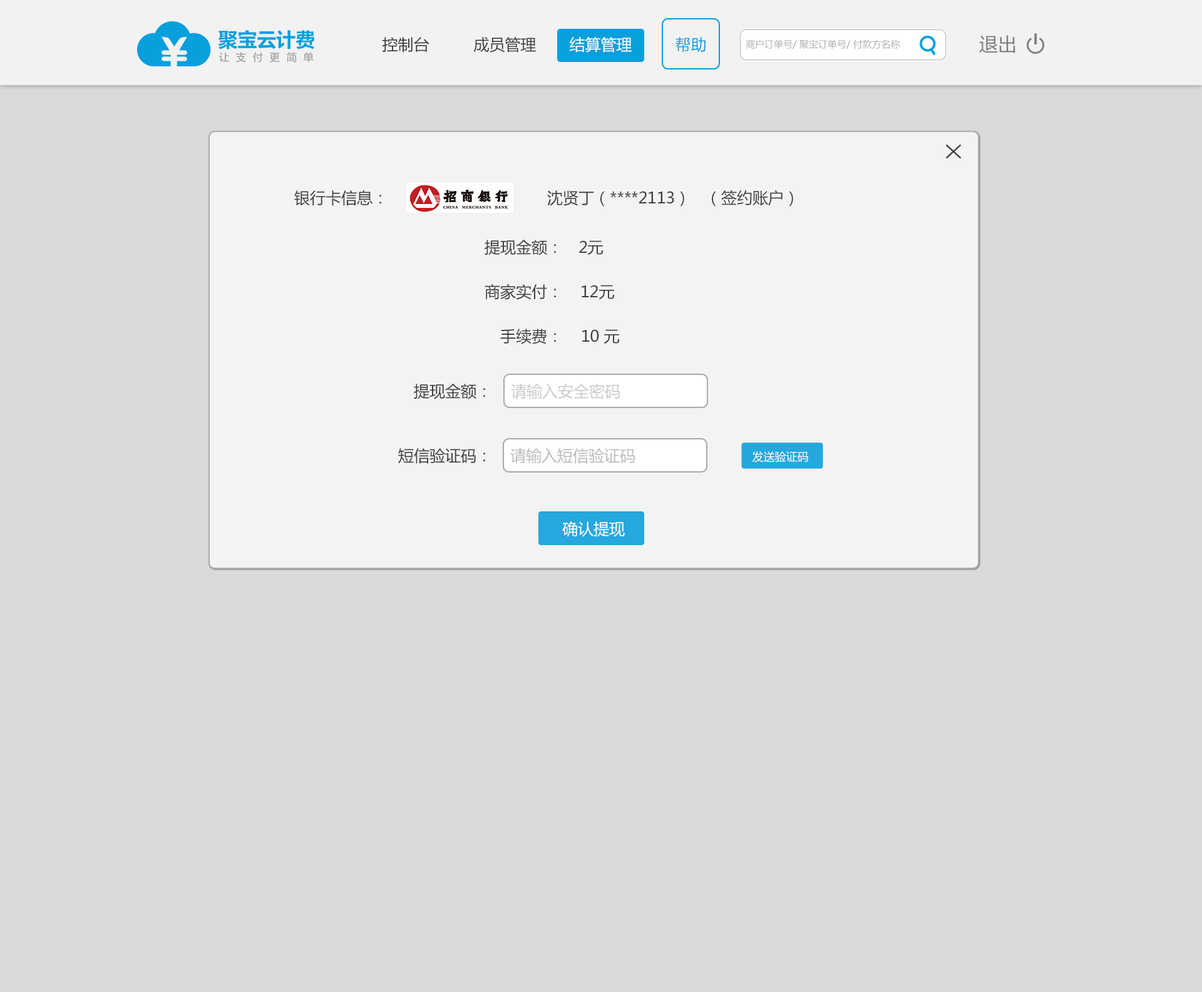
<style>
.page{position:relative;width:1202px;height:992px;background:#dadada}
.page>*{position:absolute;margin:0}
.t1{font:15.6px "MicrosoftYaHei";color:#3f3f3f}
.t2{font:15.6px "MicrosoftYaHei";color:#ffffff}
.t3{font:15.6px "MicrosoftYaHei";color:#099fdd}
.t4{font:9.4px "MicrosoftYaHei";color:#aeaeae}
.t5{font:18.8px "MicrosoftYaHei";color:#7d7d7d}
.t6{font:15.6px "MicrosoftYaHei";color:#cacaca}
.t7{font:15.6px "MicrosoftYaHei";color:#bbbbbb}
.t8{font:11.3px "MicrosoftYaHei";color:#ffffff}
</style>
<div class="page">
<p class="t1" style="left:382px;top:37px;width:47px;height:16px">控制台</p>
<p class="t1" style="left:473px;top:37px;width:63px;height:16px">成员管理</p>
<p class="t2" style="left:569px;top:37px;width:63px;height:16px">结算管理</p>
<p class="t3" style="left:675px;top:37px;width:30px;height:15px">帮助</p>
<p class="t4" style="left:746px;top:39px;width:154px;height:10px">商户订单号/ 聚宝订单号/ 付款方名称</p>
<p class="t5" style="left:979px;top:35px;width:36px;height:18px">退出</p>
<p class="t1" style="left:294px;top:190px;width:87px;height:16px">银行卡信息：</p>
<p class="t1" style="left:547px;top:190px;width:137px;height:17px">沈贤丁（****2113）</p>
<p class="t1" style="left:712px;top:190px;width:81px;height:17px">（签约账户）</p>
<p class="t1" style="left:484px;top:240px;width:72px;height:15px">提现金额：</p>
<p class="t1" style="left:579px;top:240px;width:24px;height:15px">2元</p>
<p class="t1" style="left:484px;top:284px;width:72px;height:16px">商家实付：</p>
<p class="t1" style="left:582px;top:285px;width:33px;height:15px">12元</p>
<p class="t1" style="left:500px;top:329px;width:56px;height:15px">手续费：</p>
<p class="t1" style="left:582px;top:329px;width:38px;height:15px">10 元</p>
<p class="t1" style="left:414px;top:384px;width:71px;height:15px">提现金额：</p>
<p class="t6" style="left:511px;top:384px;width:109px;height:15px">请输入安全密码</p>
<p class="t1" style="left:398px;top:448px;width:87px;height:16px">短信验证码：</p>
<p class="t7" style="left:510px;top:448px;width:125px;height:16px">请输入短信验证码</p>
<p class="t8" style="left:752px;top:451px;width:56px;height:12px">发送验证码</p>
<p class="t2" style="left:562px;top:521px;width:63px;height:16px">确认提现</p>
</div>
